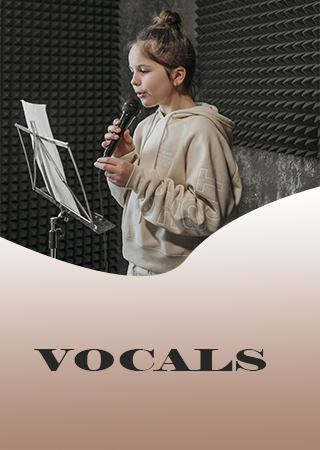
<style>
.page{position:relative;width:320px;height:450px}
.page>*{position:absolute;margin:0}
.t1{font:52px "Elephant-Regular";color:#272725;scale:1.63 1}
</style>
<div class="page">
<p class="t1" style="left:34px;top:349px;width:233px;height:22px">VOCALS</p>
</div>
